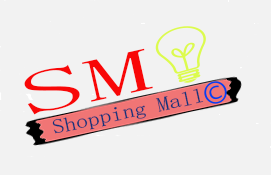
<style>
.page{position:relative;width:271px;height:175px;background:#f2f2f2}
.page>*{position:absolute;margin:0}
.t1{font:36.1px "SimSun";color:#f80707;scale:2.19 1}
.t2{font:12px "SimSun";color:#11347a;scale:1.19 1}
</style>
<div class="page">
<p class="t1" style="left:24px;top:48px;width:129px;height:67px;rotate:-13deg">SM</p>
<p class="t2" style="left:52px;top:88px;width:152px;height:46px;rotate:-12deg">Shopping Mall</p>
</div>
